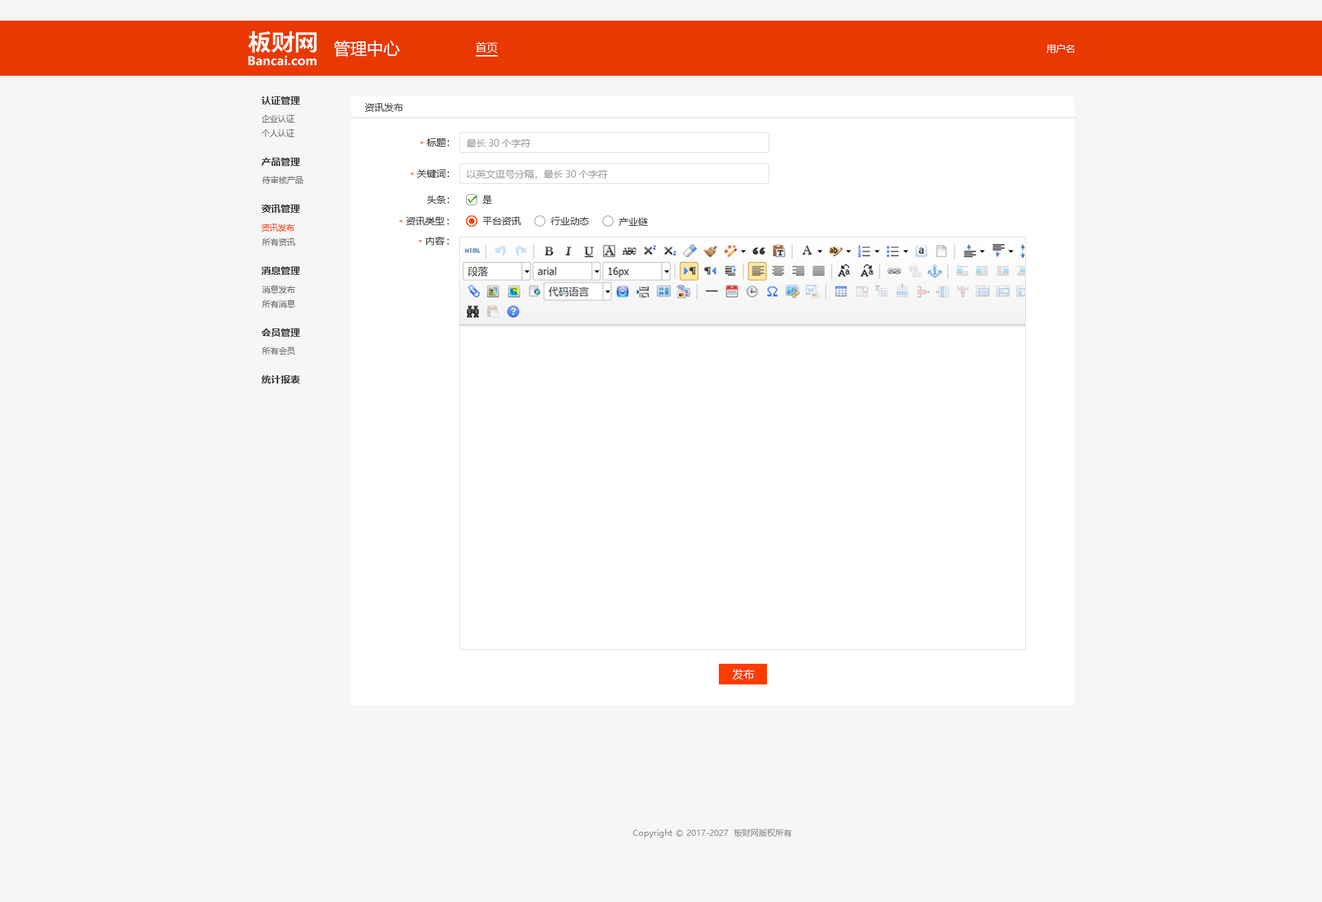
<style>
.page{position:relative;width:1322px;height:902px;background:#f6f6f6}
.page>*{position:absolute;margin:0}
.t1{font:16.5px "MicrosoftYaHei";color:#ffffff}
.t2{font:11px "MicrosoftYaHei";color:#ffffff}
.t3{font:9.6px "MicrosoftYaHei";color:#ffffff}
.t4{font:9.6px "MicrosoftYaHei-Bold";color:#333333}
.t5{font:9.6px "MicrosoftYaHei";color:#333333}
.t6{font:8.3px "MicrosoftYaHei";color:#666666}
.t7{font:8.3px "MicrosoftYaHei";color:#ff3c00}
.t8{font:9.6px "MicrosoftYaHei";color:#999999}
.t9{font:11px "MicrosoftYaHei";color:#fffefe}
.t10{font:8.3px "MicrosoftYaHei";color:#888888}
</style>
<div class="page">
<p class="t1" style="left:334px;top:41px;width:66px;height:16px">管理中心</p>
<p class="t2" style="left:476px;top:42px;width:22px;height:11px">首页</p>
<p class="t3" style="left:1047px;top:44px;width:28px;height:9px">用户名</p>
<p class="t4" style="left:262px;top:96px;width:38px;height:9px">认证管理</p>
<p class="t5" style="left:365px;top:103px;width:38px;height:9px">资讯发布</p>
<p class="t6" style="left:262px;top:115px;width:33px;height:8px">企业认证</p>
<p class="t6" style="left:262px;top:129px;width:33px;height:8px">个人认证</p>
<p class="t7" style="left:420px;top:141px;width:3px;height:3px">*</p>
<p class="t5" style="left:427px;top:138px;width:22px;height:9px">标题：</p>
<p class="t8" style="left:466px;top:139px;width:65px;height:8px">最长30个字符</p>
<p class="t4" style="left:261px;top:158px;width:39px;height:8px">产品管理</p>
<p class="t7" style="left:410px;top:172px;width:4px;height:3px">*</p>
<p class="t5" style="left:417px;top:169px;width:32px;height:9px">关键词：</p>
<p class="t8" style="left:467px;top:170px;width:141px;height:9px">以英文逗号分隔，最长30个字符</p>
<p class="t6" style="left:262px;top:176px;width:41px;height:8px">待审核产品</p>
<p class="t5" style="left:427px;top:196px;width:22px;height:8px">头条：</p>
<p class="t5" style="left:483px;top:196px;width:9px;height:8px">是</p>
<p class="t4" style="left:262px;top:204px;width:38px;height:9px">资讯管理</p>
<p class="t7" style="left:399px;top:220px;width:4px;height:2px">*</p>
<p class="t5" style="left:406px;top:217px;width:43px;height:8px">资讯类型:</p>
<p class="t5" style="left:483px;top:217px;width:38px;height:8px">平台资讯</p>
<p class="t5" style="left:551px;top:217px;width:38px;height:8px">行业动态</p>
<p class="t5" style="left:619px;top:218px;width:29px;height:8px">产业链</p>
<p class="t7" style="left:262px;top:224px;width:33px;height:7px">资讯发布</p>
<p class="t6" style="left:262px;top:238px;width:33px;height:8px">所有资讯</p>
<p class="t7" style="left:419px;top:240px;width:3px;height:2px">*</p>
<p class="t5" style="left:426px;top:237px;width:23px;height:8px">内容:</p>
<p class="t4" style="left:262px;top:266px;width:38px;height:9px">消息管理</p>
<p class="t6" style="left:262px;top:285px;width:33px;height:8px">消息发布</p>
<p class="t6" style="left:262px;top:300px;width:33px;height:8px">所有消息</p>
<p class="t4" style="left:262px;top:328px;width:38px;height:9px">会员管理</p>
<p class="t6" style="left:262px;top:347px;width:33px;height:8px">所有会员</p>
<p class="t4" style="left:262px;top:375px;width:38px;height:9px">统计报表</p>
<p class="t9" style="left:733px;top:669px;width:22px;height:11px">发布</p>
<p class="t10" style="left:633px;top:829px;width:159px;height:9px">Copyright © 2017-2027  板财网版权所有</p>
</div>
